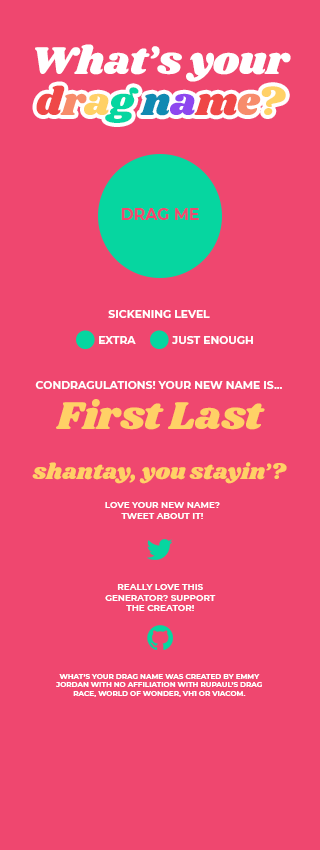
<style>
.page{position:relative;width:320px;height:850px;background:#ef476f}
.page>*{position:absolute;margin:0}
.t1{font:40px "Shrikhand-Regular";letter-spacing:-0.01em;color:#ffffff}
.t2{font:40px "Shrikhand-Regular";letter-spacing:-0.01em;color:#ef4747}
.t3{font:40px "Shrikhand-Regular";letter-spacing:-0.01em;color:#f78c6b}
.t4{font:40px "Shrikhand-Regular";letter-spacing:-0.01em;color:#ffd166}
.t5{font:40px "Shrikhand-Regular";letter-spacing:-0.01em;color:#06d6a0}
.t6{font:40px "Shrikhand-Regular";letter-spacing:-0.01em;color:#118ab2}
.t7{font:40px "Shrikhand-Regular";letter-spacing:-0.01em;color:#8e47ef}
.t8{font:16px "Montserrat-Bold";letter-spacing:-0.01em;color:#ef476f}
.t9{font:10.8px "Montserrat-Bold";color:#ffffff}
.t10{font:40px "Shrikhand-Regular";color:#ffd166}
.t11{font:22.4px "Shrikhand-Regular";color:#ffd166}
.t12{font:8.8px "Montserrat-Bold";color:#ffffff}
.t13{font:7.2px "Montserrat-Bold";color:#ffffff}
</style>
<div class="page">
<p class="t1" style="left:35px;top:44px;width:256px;height:38px">What’s your</p>
<p class="t2" style="left:36px;top:85px;width:250px;height:38px">d<span class="t3">r</span><span class="t4">a</span><span class="t5">g </span><span class="t6">n</span><span class="t7">a</span>m<span class="t3">e</span><span class="t4">?</span></p>
<p class="t8" style="left:121px;top:208px;width:78px;height:12px">DRAG ME</p>
<p class="t9" style="left:108px;top:310px;width:102px;height:8px">SICKENING LEVEL</p>
<p class="t9" style="left:99px;top:336px;width:154px;height:8px">EXTRA            JUST ENOUGH</p>
<p class="t9" style="left:35px;top:381px;width:247px;height:8px">CONDRAGULATIONS! YOUR NEW NAME IS...</p>
<p class="t10" style="left:56px;top:399px;width:209px;height:31px">First Last</p>
<p class="t11" style="left:32px;top:462px;width:255px;height:22px">shantay, you stayin’?</p>
<p class="t12" style="left:105px;top:502px;width:115px;height:17px;text-align:center">LOVE YOUR NEW NAME? TWEET ABOUT IT!</p>
<p class="t12" style="left:105px;top:584px;width:111px;height:27px;text-align:center">REALLY LOVE THIS GENERATOR? SUPPORT THE CREATOR!</p>
<p class="t13" style="left:56px;top:674px;width:206px;height:23px;text-align:center">WHAT’S YOUR DRAG NAME WAS CREATED BY EMMY JORDAN WITH NO AFFILIATION WITH RUPAUL’S DRAG RACE, WORLD OF WONDER, VH1 OR VIACOM.</p>
</div>
